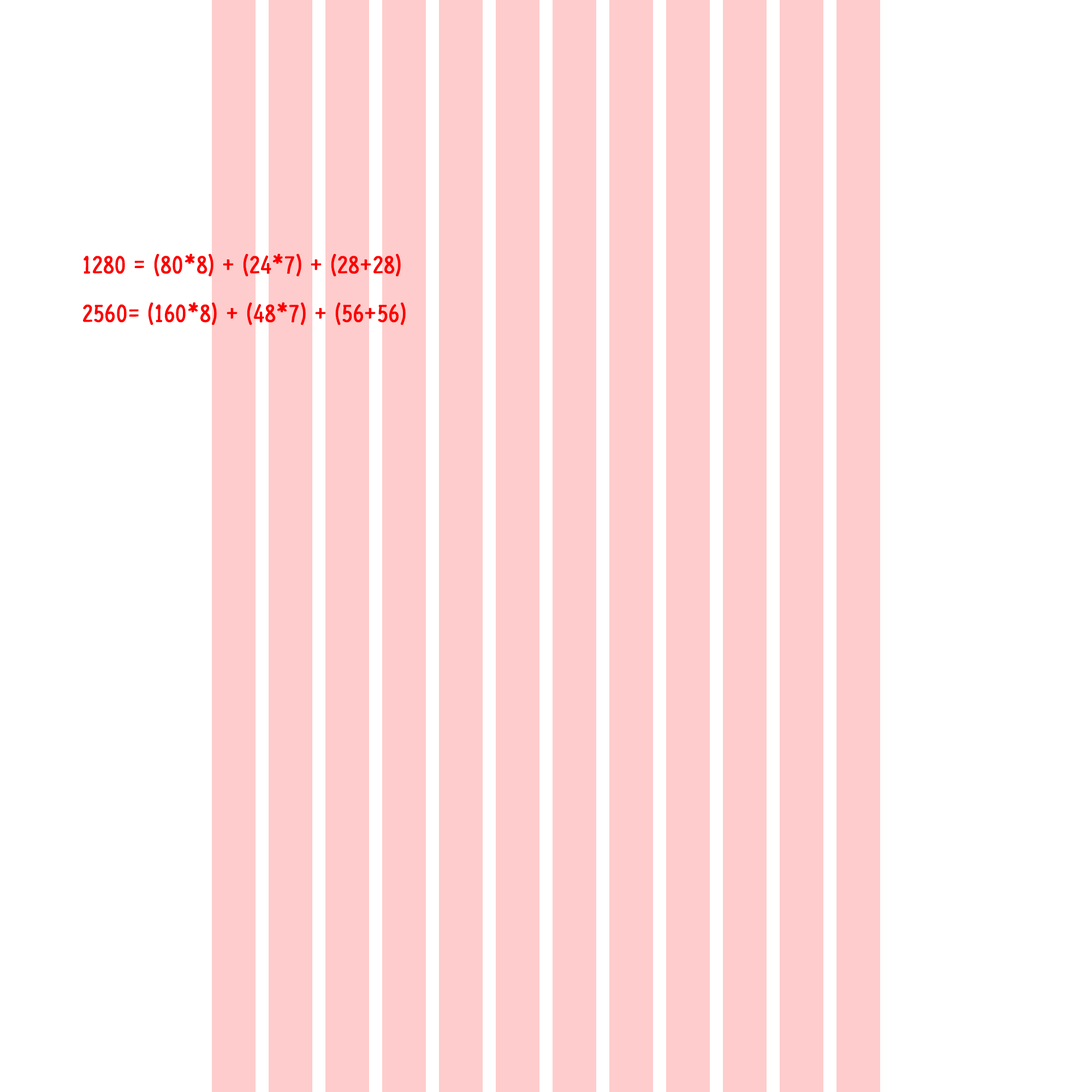
<style>
.page{position:relative;width:1092px;height:1092px;background:#ffffff}
.page>*{position:absolute;margin:0}
.t1{font:26.2px "KoreanEMPJ-B";letter-spacing:-0.05em;color:#fc0000;font-weight:bold}
</style>
<div class="page">
<p class="t1" style="left:84px;top:253px;width:317px;height:23px">1280 = (80*8) + (24*7) + (28+28)</p>
<p class="t1" style="left:83px;top:302px;width:323px;height:23px">2560= (160*8) + (48*7) + (56+56)</p>
</div>
